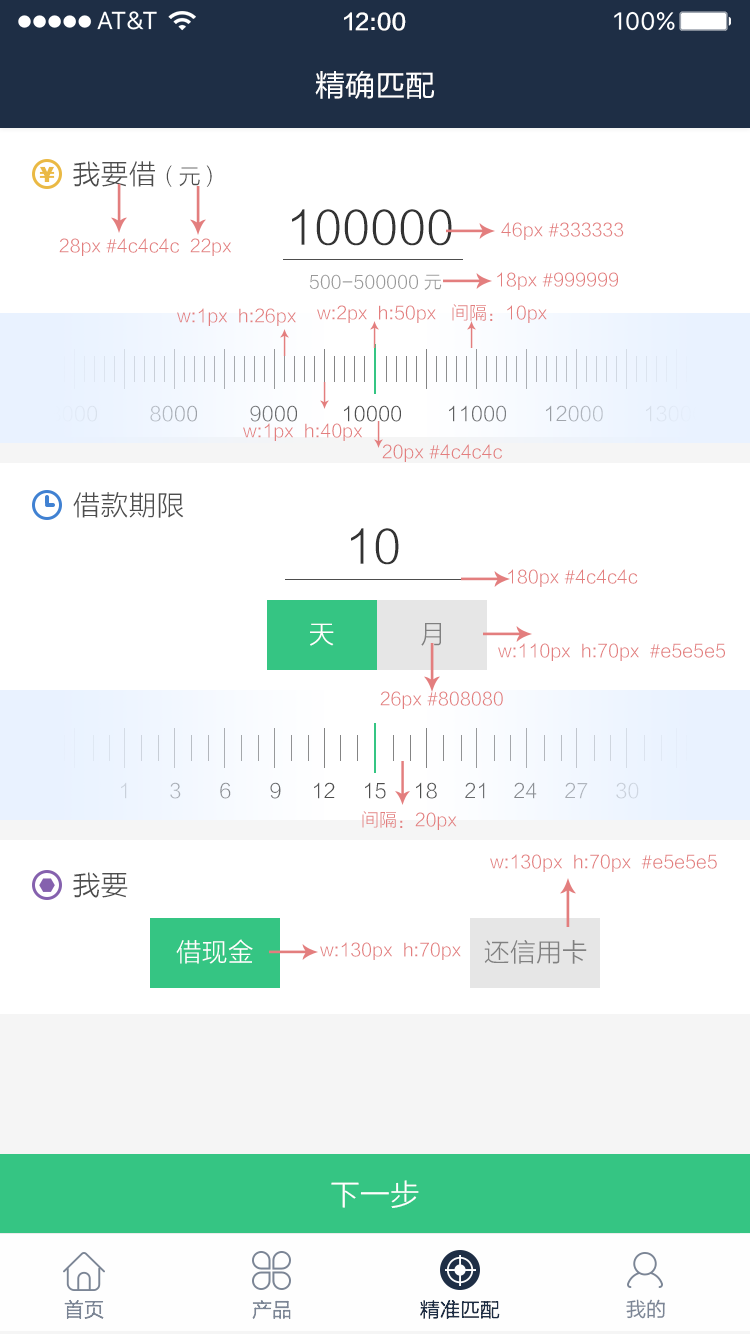
<style>
.page{position:relative;width:750px;height:1334px;background:#ffffff}
.page>*{position:absolute;margin:0}
.t1{font:22px "FZLTZHK--GBK1-0";color:#ffffff}
.t2{font:30px "FZLTHJW--GB1-0";color:#ffffff}
.t3{font:28px "FZLTXHK";color:#4d4d4d}
.t4{font:22px "FZLTXHK";color:#4d4d4d}
.t5{font:21px "FZCCHK--GBK1-0";color:#eab945}
.t6{font:46px "FZLTXHK";color:#333333}
.t7{font:18px "FZLTXHK";color:#e37e7e}
.t8{font:18px "FZLTXHK";color:#999999}
.t9{font:20px "FZLTXHK";color:#e2ebf7}
.t10{font:20px "FZLTXHK";color:#abb1b9}
.t11{font:20px "FZLTXHK";color:#6c6e71}
.t12{font:20px "FZLTXHK";color:#4d4d4d}
.t13{font:20px "FZLTXHK";color:#6d6f71}
.t14{font:20px "FZLTXHK";color:#a6abb2}
.t15{font:20px "FZLTXHK";color:#dfe8f4}
.t16{font:26px "FZLTXHK";color:#ffffff}
.t17{font:26px "FZLTXHK";color:#808080}
.t18{font:20px "FZLTXHK";color:#cad1db}
.t19{font:20px "FZLTXHK";color:#a8adb5}
.t20{font:20px "FZLTXHK";color:#86898e}
.t21{font:20px "FZLTXHK";color:#68696c}
.t22{font:20px "FZLTXHK";color:#696b6d}
.t23{font:20px "FZLTXHK";color:#888b90}
.t24{font:20px "FZLTXHK";color:#a9aeb6}
.t25{font:20px "FZLTXHK";color:#ccd3dd}
.t26{font:30px "FZLTXHK";color:#ffffff}
.t27{font:20px "FZLTXHK";color:#7b8595}
.t28{font:20px "FZLTXHK";color:#1e2e45}
.t29{font:20px "FZLTHK--GBK1-0";color:#7b8595}
</style>
<div class="page">
<p class="t1" style="left:344px;top:12px;width:62px;height:19px">12:00</p>
<p class="t2" style="left:315px;top:71px;width:120px;height:28px">精确匹配</p>
<p class="t3" style="left:73px;top:161px;width:139px;height:26px">我要借<span class="t4">（元）</span></p>
<p class="t5" style="left:39px;top:166px;width:16px;height:16px">￥</p>
<p class="t6" style="left:292px;top:209px;width:160px;height:37px">100000</p>
<p class="t7" style="left:501px;top:222px;width:123px;height:18px">46px #333333</p>
<p class="t7" style="left:59px;top:238px;width:120px;height:18px">28px #4c4c4c</p>
<p class="t7" style="left:190px;top:238px;width:41px;height:18px">22px</p>
<p class="t8" style="left:309px;top:274px;width:133px;height:16px">500-500000元</p>
<p class="t7" style="left:497px;top:272px;width:121px;height:18px">18px #999999</p>
<p class="t7" style="left:317px;top:305px;width:119px;height:18px">w:2px  h:50px</p>
<p class="t7" style="left:452px;top:304px;width:95px;height:19px">间隔：10px</p>
<p class="t7" style="left:177px;top:308px;width:119px;height:18px">w:1px  h:26px</p>
<p class="t9" style="left:50px;top:405px;width:47px;height:17px">8000</p>
<p class="t10" style="left:150px;top:405px;width:47px;height:17px">8000</p>
<p class="t11" style="left:250px;top:405px;width:47px;height:17px">9000</p>
<p class="t12" style="left:344px;top:405px;width:57px;height:17px">10000</p>
<p class="t13" style="left:449px;top:405px;width:57px;height:17px">11000</p>
<p class="t14" style="left:546px;top:405px;width:57px;height:17px">12000</p>
<p class="t15" style="left:646px;top:405px;width:57px;height:17px">13000</p>
<p class="t7" style="left:243px;top:423px;width:119px;height:18px">w:1px  h:40px</p>
<p class="t7" style="left:382px;top:444px;width:120px;height:18px">20px #4c4c4c</p>
<p class="t3" style="left:73px;top:492px;width:111px;height:26px">借款期限</p>
<p class="t6" style="left:351px;top:528px;width:48px;height:37px">10</p>
<p class="t7" style="left:508px;top:569px;width:130px;height:18px">180px #4c4c4c</p>
<p class="t16" style="left:310px;top:623px;width:24px;height:23px">天</p>
<p class="t17" style="left:421px;top:623px;width:20px;height:23px">月</p>
<p class="t7" style="left:498px;top:643px;width:227px;height:18px">w:110px  h:70px  #e5e5e5</p>
<p class="t7" style="left:380px;top:691px;width:123px;height:18px">26px #808080</p>
<p class="t18" style="left:121px;top:782px;width:6px;height:17px">1</p>
<p class="t19" style="left:170px;top:782px;width:11px;height:17px">3</p>
<p class="t20" style="left:220px;top:782px;width:11px;height:17px">6</p>
<p class="t21" style="left:270px;top:782px;width:11px;height:17px">9</p>
<p class="t12" style="left:314px;top:782px;width:21px;height:17px">12</p>
<p class="t12" style="left:365px;top:782px;width:21px;height:17px">15</p>
<p class="t12" style="left:416px;top:782px;width:21px;height:17px">18</p>
<p class="t22" style="left:465px;top:782px;width:20px;height:17px">21</p>
<p class="t23" style="left:514px;top:782px;width:23px;height:17px">24</p>
<p class="t24" style="left:565px;top:782px;width:23px;height:17px">27</p>
<p class="t25" style="left:616px;top:782px;width:23px;height:17px">30</p>
<p class="t7" style="left:362px;top:811px;width:95px;height:19px">间隔：20px</p>
<p class="t7" style="left:490px;top:854px;width:227px;height:18px">w:130px  h:70px  #e5e5e5</p>
<p class="t3" style="left:73px;top:872px;width:55px;height:26px">我要</p>
<p class="t16" style="left:176px;top:939px;width:77px;height:25px">借现金</p>
<p class="t7" style="left:320px;top:942px;width:141px;height:18px">w:130px  h:70px</p>
<p class="t17" style="left:484px;top:940px;width:103px;height:24px">还信用卡</p>
<p class="t26" style="left:331px;top:1180px;width:88px;height:28px">下一步</p>
<p class="t27" style="left:64px;top:1299px;width:40px;height:20px">首页</p>
<p class="t27" style="left:252px;top:1300px;width:39px;height:19px">产品</p>
<p class="t28" style="left:420px;top:1300px;width:80px;height:19px">精准匹配</p>
<p class="t29" style="left:626px;top:1299px;width:39px;height:20px">我的</p>
</div>
